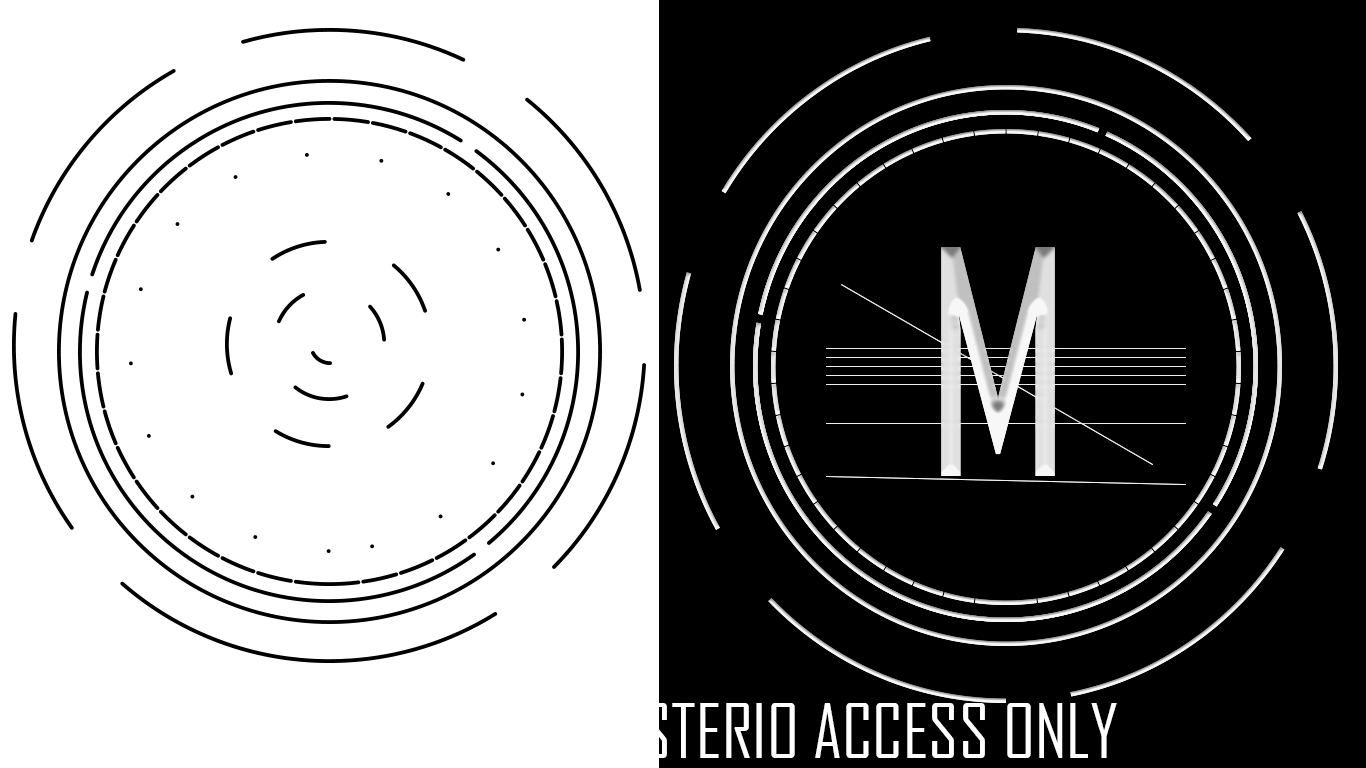
<style>
.page{position:relative;width:1366px;height:768px;background:#000000}
.page>*{position:absolute;margin:0}
.t1{font:72px "AgencyFB-Reg";color:#ffffff}
</style>
<div class="page">
<p class="t1" style="left:313px;top:703px;width:804px;height:55px">CLASSIFIED MYSTERIO ACCESS ONLY</p>
</div>
